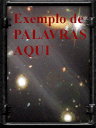
<style>
.page{position:relative;width:96px;height:128px}
.page>*{position:absolute;margin:0}
.t1{font:14px/16px "TimesNewRomanPS-BoldMT";color:#8e0908}
</style>
<div class="page">
<p class="t1" style="left:13px;top:13px;width:74px;height:45px">Exemplo de<br>PALAVRAS<br>AQUI</p>
</div>
